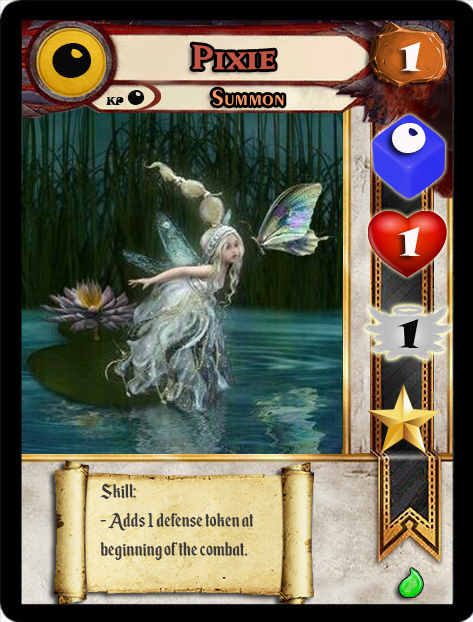
<style>
.page{position:relative;width:473px;height:622px}
.page>*{position:absolute;margin:0}
.t1{font:46.6px "SnapITC-Regular";color:#090909;scale:1.05 1}
.t2{font:40px "MatrixBoldSmallCaps";color:#c25443;scale:1.06 1}
.t3{font:40px "SnapITC-Regular";color:#fef9f9;scale:1.05 1}
.t4{font:22.7px "Exotic350BT-DemiBold";color:#f89c64;scale:1.06 1}
.t5{font:20.5px "SnapITC-Regular";color:#090909}
.t6{font:40px "SnapITC-Regular";color:#090909;scale:1.05 1}
.t7{font:24px "EnchantedLand";color:#3e3939}
</style>
<div class="page">
<p class="t1" style="left:52px;top:43px;width:40px;height:35px">0</p>
<p class="t2" style="left:192px;top:44px;width:83px;height:26px">Pixie</p>
<p class="t3" style="left:399px;top:42px;width:22px;height:29px">1</p>
<p class="t4" style="left:212px;top:89px;width:72px;height:17px">Summon</p>
<p class="t5" style="left:127px;top:90px;width:18px;height:15px">0</p>
<p class="t3" style="left:392px;top:123px;width:34px;height:30px">0</p>
<p class="t3" style="left:398px;top:227px;width:22px;height:29px">1</p>
<p class="t6" style="left:397px;top:319px;width:22px;height:29px">1</p>
<p class="t7" style="left:100px;top:483px;width:154px;height:77px">Skill:<br>- Adds 1 defense token at beginning of the combat.</p>
</div>
